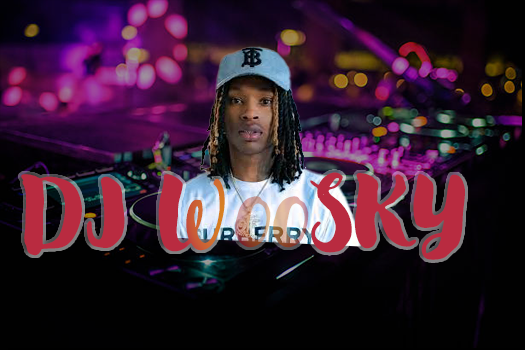
<style>
.page{position:relative;width:525px;height:350px}
.page>*{position:absolute;margin:0}
.t1{font:88.2px "ModernLove-Regular";color:#b92b40}
.t2{font:58.2px "ModernLove-Regular"}
</style>
<div class="page">
<p class="t1" style="left:21px;top:172px;width:444px;height:88px;rotate:-1deg">DJ W   SKY</p>
<p class="t2" style="left:235px;top:196px;width:74px;height:52px;rotate:-1deg">OO</p>
</div>
